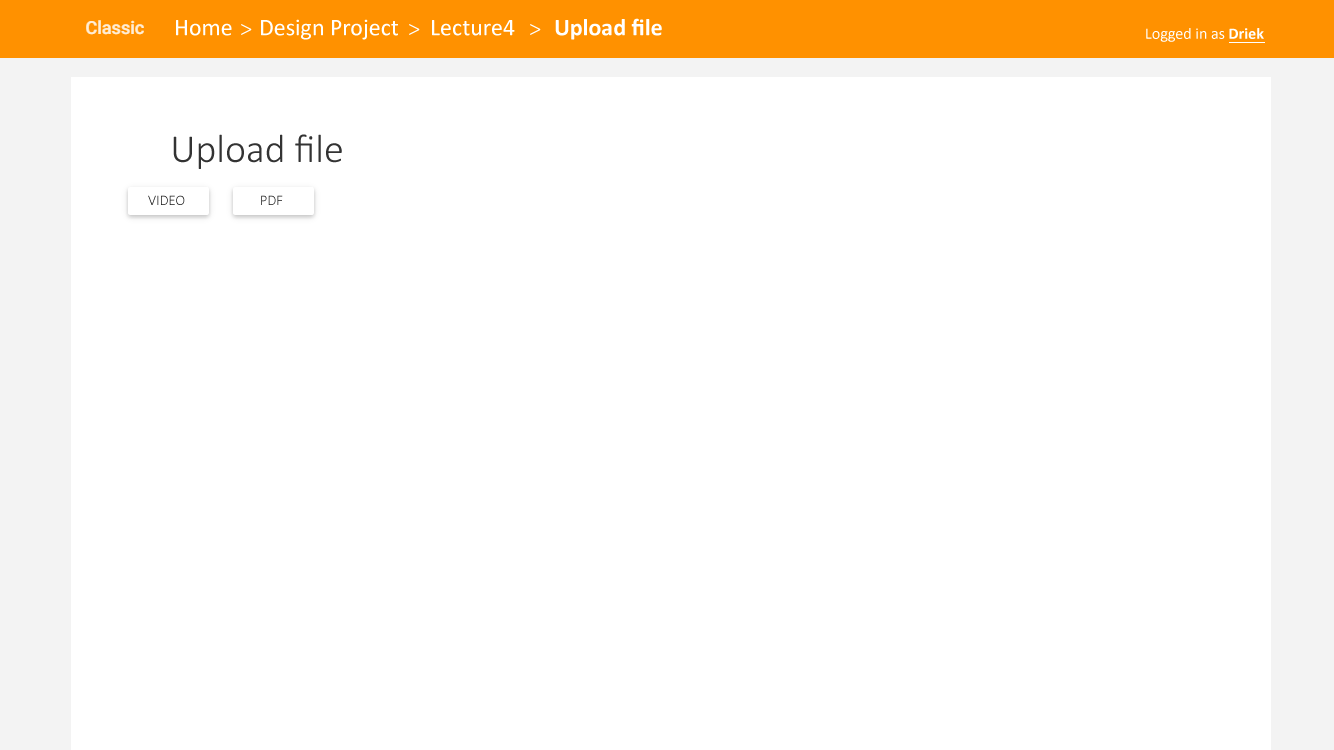
<style>
.page{position:relative;width:1334px;height:750px;background:#ffffff}
.page>*{position:absolute;margin:0}
.t1{font:24px "Calibri";color:#ffffff}
.t2{font:24px "Calibri-Light";color:#ffffff}
.t3{font:24px "Calibri-Bold";color:#ffffff}
.t4{font:16px "Calibri";color:#ffffff}
.t5{font:16px "Calibri-Bold";color:#ffffff}
.t6{font:40px "Calibri-Light";color:#333333}
.t7{font:14.7px "Calibri-Light"}
</style>
<div class="page">
<p class="t1" style="left:176px;top:20px;width:56px;height:16px">Home</p>
<p class="t2" style="left:241px;top:24px;width:11px;height:11px">&gt;</p>
<p class="t1" style="left:261px;top:19px;width:137px;height:21px">Design Project</p>
<p class="t2" style="left:409px;top:24px;width:11px;height:11px">&gt;</p>
<p class="t1" style="left:432px;top:20px;width:83px;height:16px">Lecture4</p>
<p class="t2" style="left:530px;top:24px;width:11px;height:11px">&gt;</p>
<p class="t3" style="left:555px;top:18px;width:107px;height:22px">Upload file</p>
<p class="t4" style="left:1146px;top:28px;width:118px;height:14px">Logged in as <span class="t5">Driek</span></p>
<p class="t6" style="left:173px;top:134px;width:169px;height:35px">Upload file</p>
<p class="t7" style="left:148px;top:195px;width:37px;height:10px">VIDEO</p>
<p class="t7" style="left:261px;top:195px;width:22px;height:10px">PDF</p>
</div>
